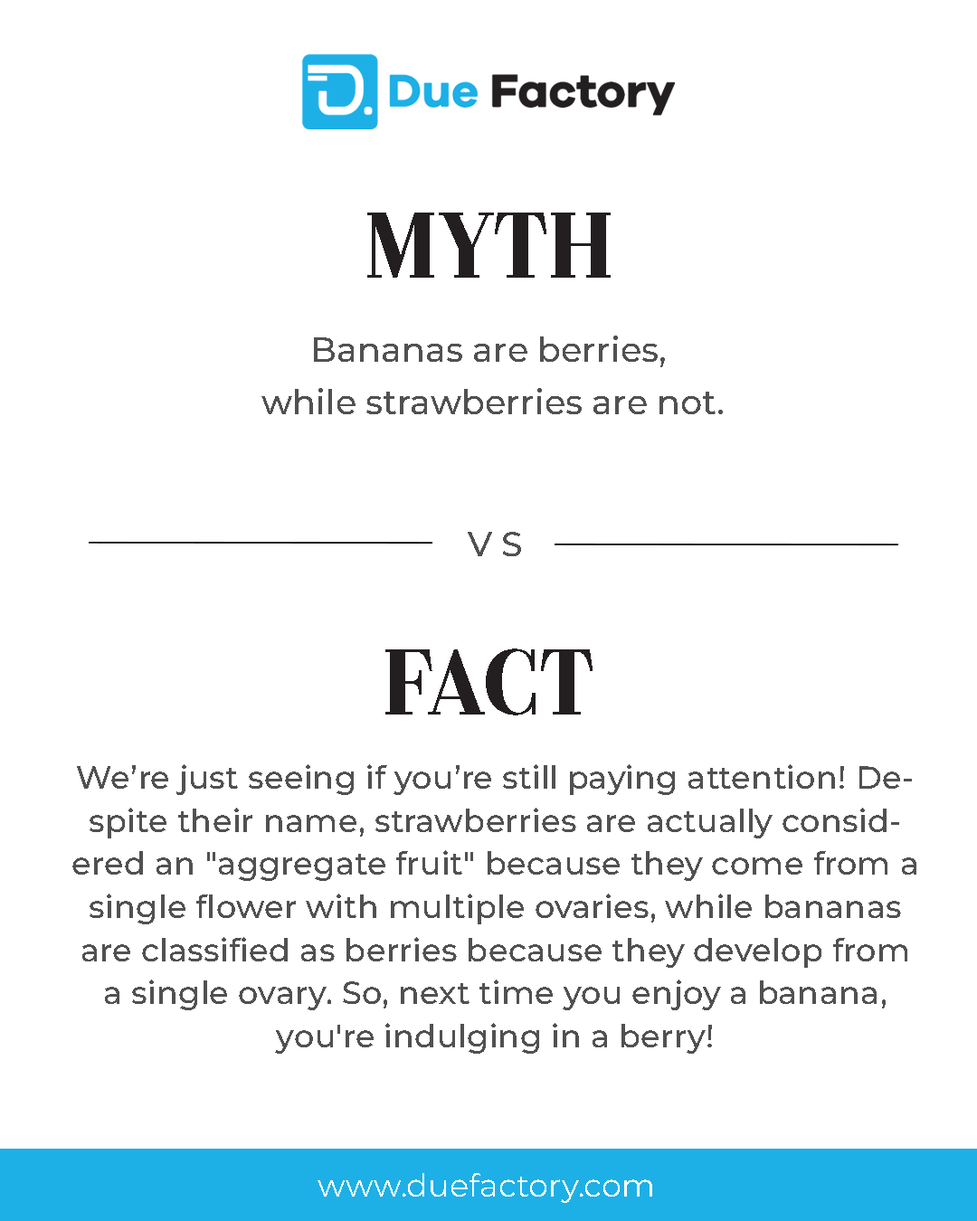
<style>
.page{position:relative;width:977px;height:1221px;background:#ffffff}
.page>*{position:absolute;margin:0}
.t1{font:81px "Couturier-SemiBold";color:#231f20}
.t2{font:33.9px/52.9px "Montserrat-Medium";color:#515151}
.t3{font:33.9px "Montserrat-Medium";color:#515151}
.t4{font:32px/43.1px "Montserrat-Medium";color:#515151}
.t5{font:32px "Montserrat-Regular";color:#ffffff}
</style>
<div class="page">
<p class="t1" style="left:367px;top:213px;width:243px;height:65px">MYTH</p>
<p class="t2" style="left:261px;top:336px;width:462px;height:78px;text-align:center">Bananas are berries, <br>while strawberries are not.</p>
<p class="t3" style="left:468px;top:532px;width:53px;height:24px">V S</p>
<p class="t1" style="left:385px;top:648px;width:207px;height:67px">FACT</p>
<p class="t4" style="left:72px;top:764px;width:844px;height:290px;text-align:center">We’re just seeing if you’re still paying attention! Despite their name, strawberries are actually considered an "aggregate fruit" because they come from a single flower with multiple ovaries, while bananas are classified as berries because they develop from a single ovary. So, next time you enjoy a banana, you're indulging in a berry!</p>
<p class="t5" style="left:317px;top:1173px;width:335px;height:30px">www.duefactory.com</p>
</div>
